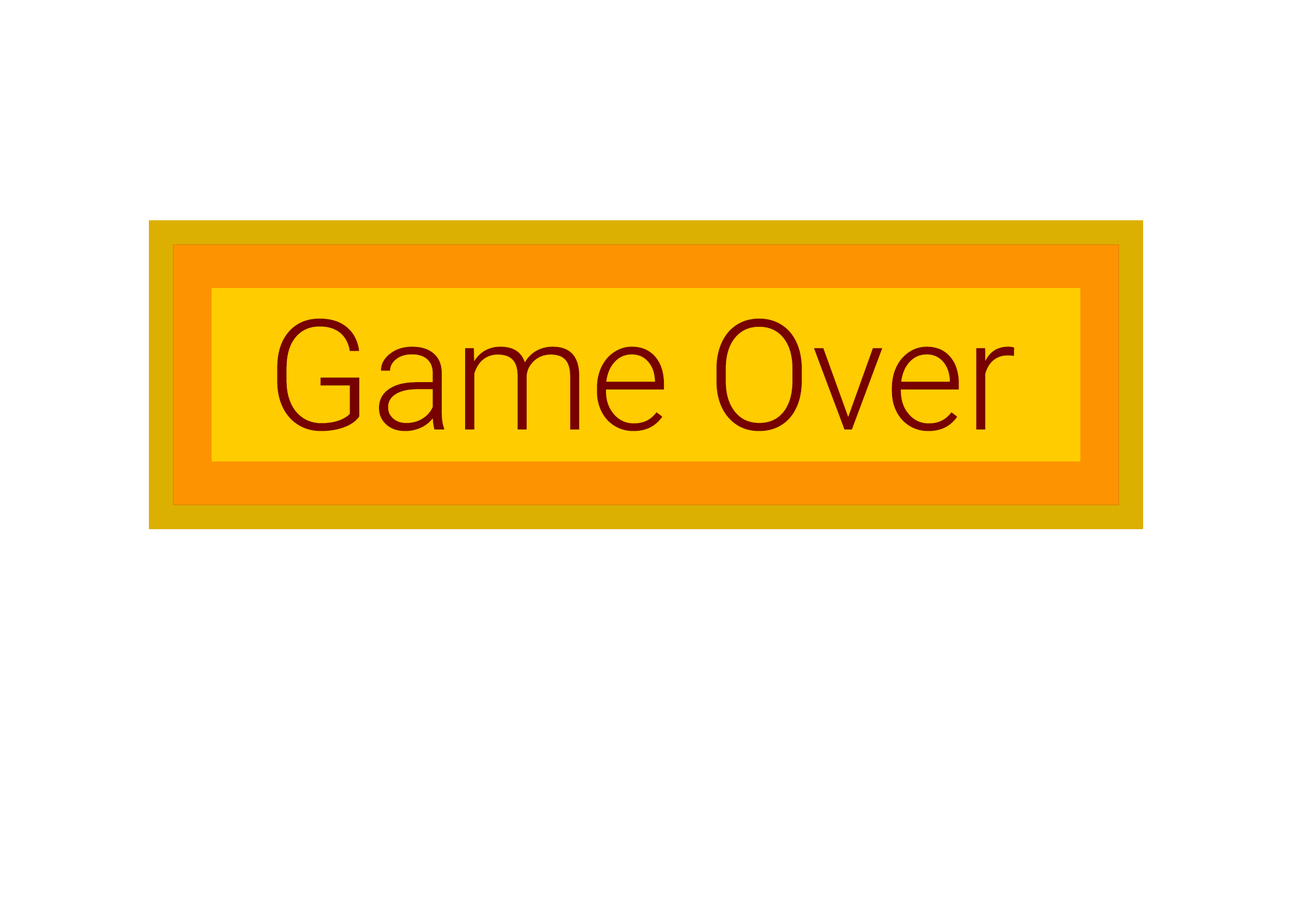
<style>
.page{position:relative;width:1292px;height:923px;background:#ffffff}
.page>*{position:absolute;margin:0}
.t1{font:153.8px "Roboto-Light";color:#770000}
</style>
<div class="page">
<p class="t1" style="left:277px;top:318px;width:738px;height:113px">Game Over</p>
</div>
